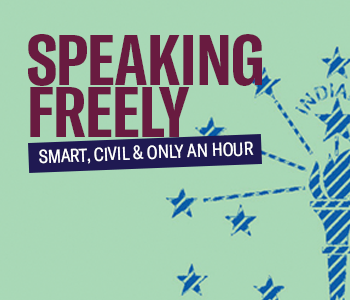
<style>
.page{position:relative;width:350px;height:300px;background:#a9d8b6}
.page>*{position:absolute;margin:0}
.t1{font:70.5px/52.2px "GTAmerica-CompressedBold";letter-spacing:-0.01em;color:#691b40}
.t2{font:18.2px "GTAmerica-CondensedRegular";letter-spacing:-0.01em;color:#ffffff}
</style>
<div class="page">
<p class="t1" style="left:28px;top:34px;width:234px;height:103px">SPEAKING<br>FREELY</p>
<p class="t2" style="left:39px;top:141px;width:215px;height:23px;rotate:-2deg">SMART, CIVIL &amp; ONLY AN HOUR</p>
</div>
